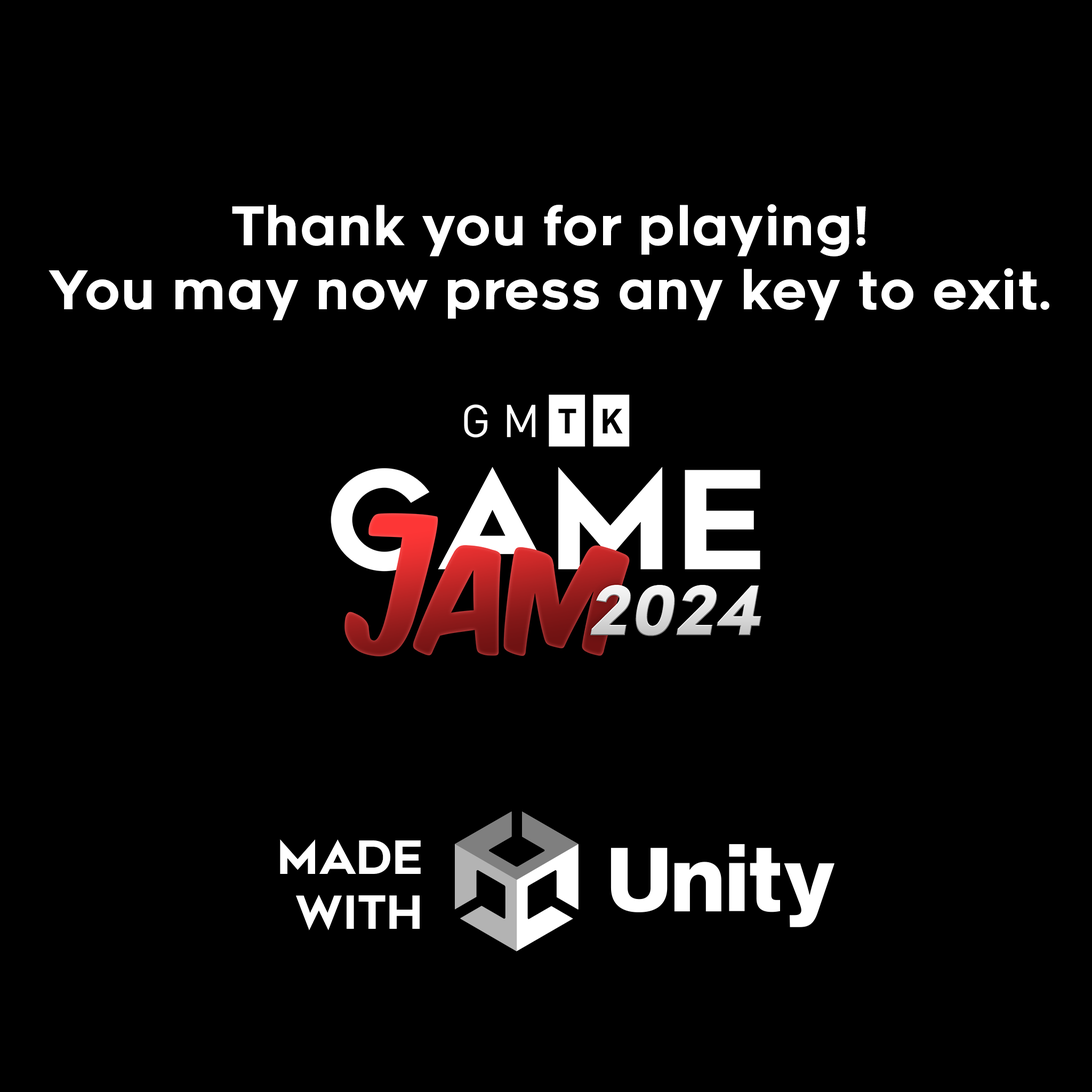
<style>
.page{position:relative;width:1092px;height:1092px;background:#000000}
.page>*{position:absolute;margin:0}
.t1{font:53.3px "Renogare-Regular";color:#ffffff}
.t2{font:45.6px "Renogare-Regular";color:#ffffff}
</style>
<div class="page">
<p class="t1" style="left:49px;top:204px;width:1000px;height:116px;text-align:center">Thank you for playing!<br>You may now press any key to exit.</p>
<p class="t2" style="left:280px;top:839px;width:141px;height:91px;text-align:right">MADE<br>WITH</p>
</div>
